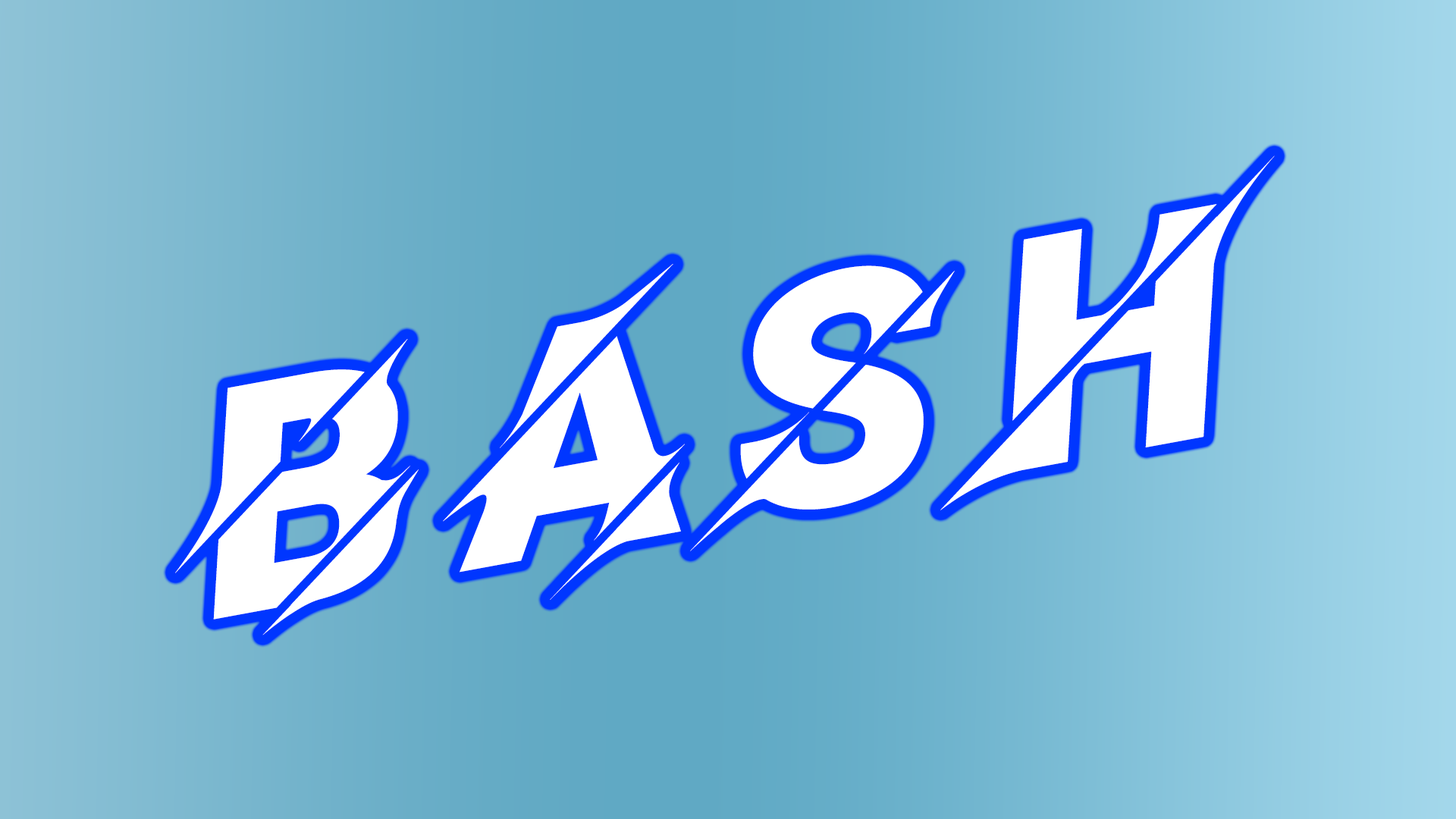
<style>
.page{position:relative;width:1456px;height:819px}
.page>*{position:absolute;margin:0}
.t1{font:316px "Facon";letter-spacing:0.1em;color:#ffffff}
</style>
<div class="page">
<p class="t1" style="left:175px;top:155px;width:1100px;height:480px;rotate:-10deg">BASH</p>
</div>
